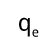
<style>
.page{position:relative;width:53px;height:41px;background:#ffffff}
.page>*{position:absolute;margin:0}
.t1{font:23.7px "DroidSans";color:#000000}
.t2{font:13.4px "DroidSans";color:#000000}
</style>
<div class="page">
<p class="t1" style="left:19px;top:17px;width:11px;height:20px">q</p>
<p class="t2" style="left:32px;top:29px;width:7px;height:8px">e</p>
</div>
